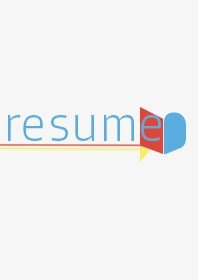
<style>
.page{position:relative;width:198px;height:280px;background:#f6f6f6}
.page>*{position:absolute;margin:0}
.t1{font:47.4px "Allotrope-ExtraLight";letter-spacing:0.04em;color:#5aaee0}
</style>
<div class="page">
<p class="t1" style="left:8px;top:115px;width:153px;height:26px">resume</p>
</div>
